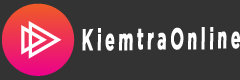
<style>
.page{position:relative;width:240px;height:80px;background:#333333}
.page>*{position:absolute;margin:0}
.t1{font:30px "Gotham-Bold";letter-spacing:0.2em;color:#ffffff;font-weight:bold;scale:0.53 1}
</style>
<div class="page">
<p class="t1" style="left:82px;top:27px;width:158px;height:24px;rotate:-1deg">KiemtraOnline</p>
</div>
